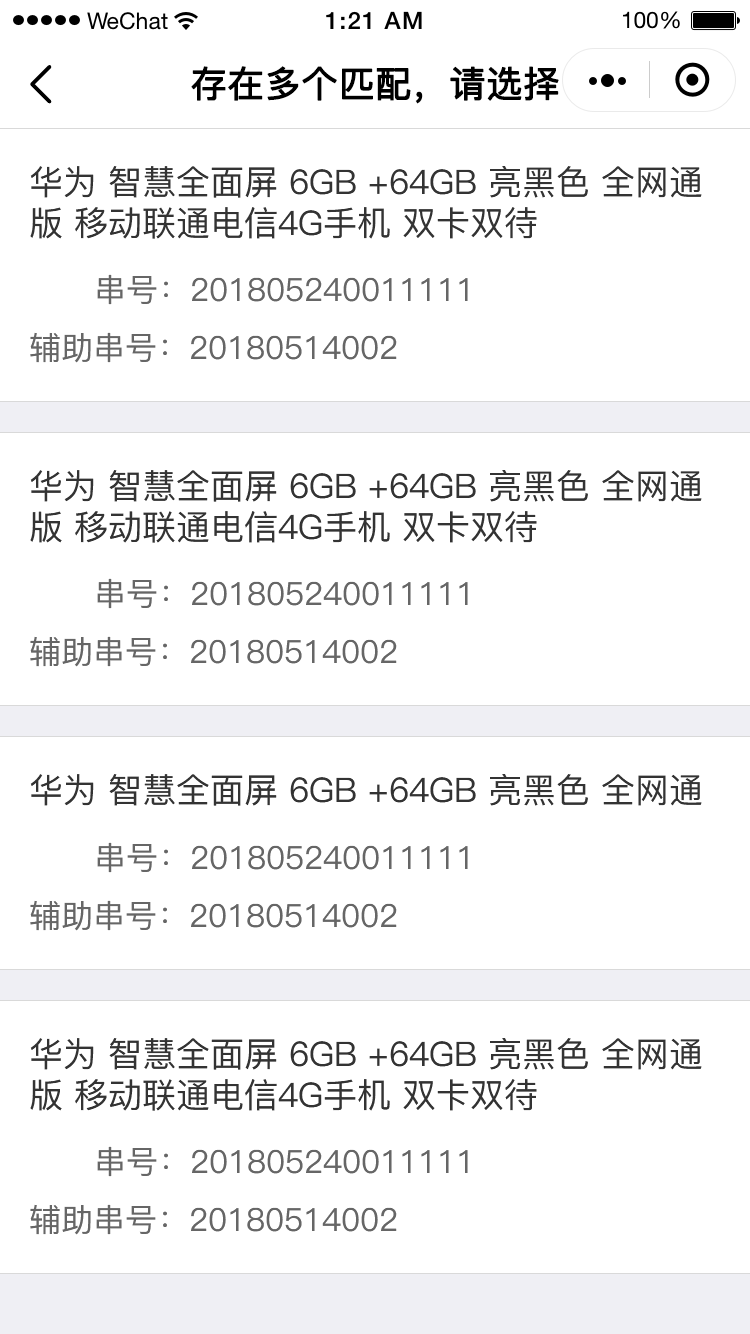
<style>
.page{position:relative;width:750px;height:1334px;background:#ffffff}
.page>*{position:absolute;margin:0}
.t1{font:36px "PingFang-SC-Medium";color:#000000;font-weight:bold}
.t2{font:34px "PingFang-SC-Medium";color:#333333}
.t3{font:32px "PingFang-SC-Medium";color:#666666}
</style>
<div class="page">
<p class="t1" style="left:191px;top:66px;width:368px;height:38px">存在多个匹配，请选择</p>
<p class="t2" style="left:30px;top:166px;width:672px;height:73px">华为 智慧全面屏 6GB +64GB 亮黑色 全网通版 移动联通电信4G手机 双卡双待</p>
<p class="t3" style="left:97px;top:274px;width:371px;height:31px">串号：201805240011111</p>
<p class="t3" style="left:30px;top:332px;width:367px;height:31px">辅助串号：20180514002</p>
<p class="t2" style="left:30px;top:470px;width:672px;height:73px">华为 智慧全面屏 6GB +64GB 亮黑色 全网通版 移动联通电信4G手机 双卡双待</p>
<p class="t3" style="left:97px;top:578px;width:371px;height:31px">串号：201805240011111</p>
<p class="t3" style="left:30px;top:636px;width:367px;height:31px">辅助串号：20180514002</p>
<p class="t2" style="left:30px;top:774px;width:672px;height:32px">华为 智慧全面屏 6GB +64GB 亮黑色 全网通</p>
<p class="t3" style="left:97px;top:842px;width:371px;height:31px">串号：201805240011111</p>
<p class="t3" style="left:30px;top:900px;width:367px;height:31px">辅助串号：20180514002</p>
<p class="t2" style="left:30px;top:1038px;width:672px;height:73px">华为 智慧全面屏 6GB +64GB 亮黑色 全网通版 移动联通电信4G手机 双卡双待</p>
<p class="t3" style="left:97px;top:1146px;width:371px;height:31px">串号：201805240011111</p>
<p class="t3" style="left:30px;top:1204px;width:367px;height:31px">辅助串号：20180514002</p>
</div>
